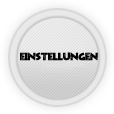
<style>
.page{position:relative;width:114px;height:114px}
.page>*{position:absolute;margin:0}
.t1{font:10px "GreekDinerInlineTT";color:#000002}
</style>
<div class="page">
<p class="t1" style="left:20px;top:52px;width:78px;height:9px">Einstellungen</p>
</div>
